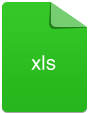
<style>
.page{position:relative;width:88px;height:113px}
.page>*{position:absolute;margin:0}
.t1{font:20px "Helvetica";color:#ffffff}
</style>
<div class="page">
<p class="t1" style="left:31px;top:55px;width:25px;height:15px">xls</p>
</div>
